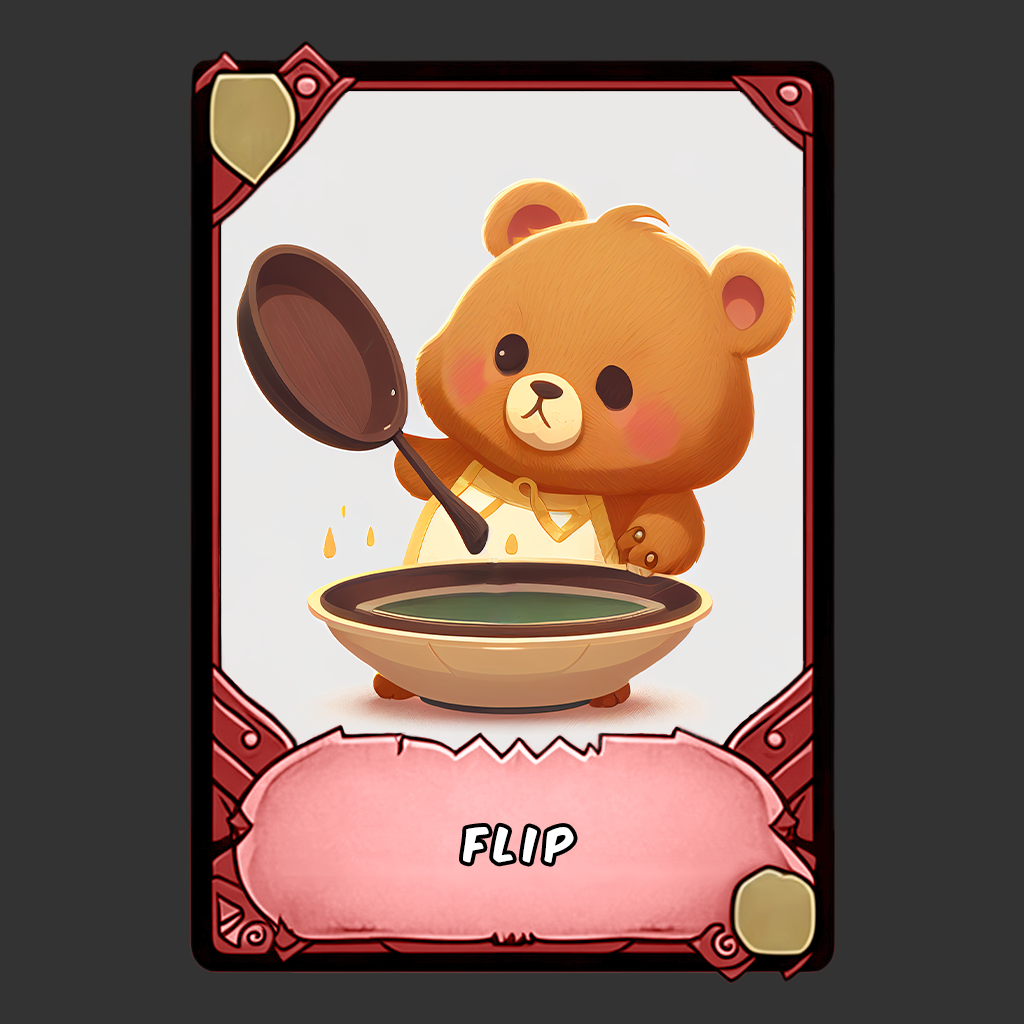
<style>
.page{position:relative;width:1024px;height:1024px;background:#333333}
.page>*{position:absolute;margin:0}
.t1{font:40px "KomikaAxis";letter-spacing:0.2em;color:#ffffff}
</style>
<div class="page">
<p class="t1" style="left:463px;top:826px;width:111px;height:37px">FLIP</p>
</div>
